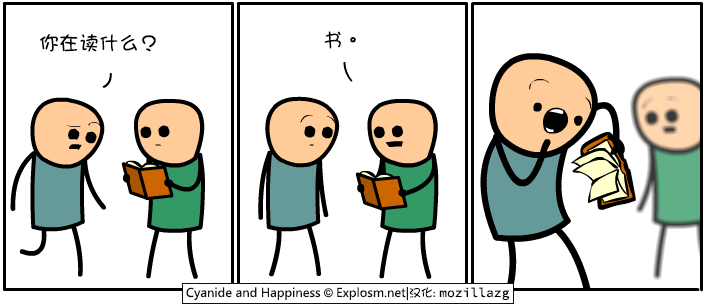
<style>
.page{position:relative;width:708px;height:308px;background:#ffffff}
.page>*{position:absolute;margin:0}
.t1{font:20px "DFGirl";color:#000000}
</style>
<div class="page">
<p class="t1" style="left:39px;top:33px;width:117px;height:19px">你在读什么？</p>
<p class="t1" style="left:324px;top:31px;width:32px;height:18px">书。</p>
</div>
